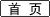
<style>
.page{position:relative;width:50px;height:17px;background:#ffffff}
.page>*{position:absolute;margin:0}
.t1{font:14px "SimHei";color:#000000}
</style>
<div class="page">
<p class="t1" style="left:8px;top:2px;width:34px;height:14px">首 页</p>
</div>
